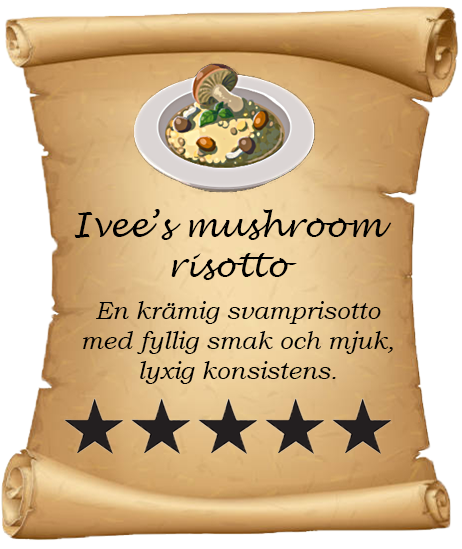
<style>
.page{position:relative;width:462px;height:549px}
.page>*{position:absolute;margin:0}
.t1{font:33.3px "LucidaHandwriting-Italic";color:#000000}
.t2{font:25px "BookmanOldStyle-Italic";color:#000000}
</style>
<div class="page">
<p class="t1" style="left:74px;top:209px;width:318px;height:71px;text-align:center">Ivee’s mushroom risotto</p>
<p class="t2" style="left:83px;top:301px;width:310px;height:83px;text-align:center">En krämig svamprisotto med fyllig smak och mjuk, lyxig konsistens.</p>
</div>
